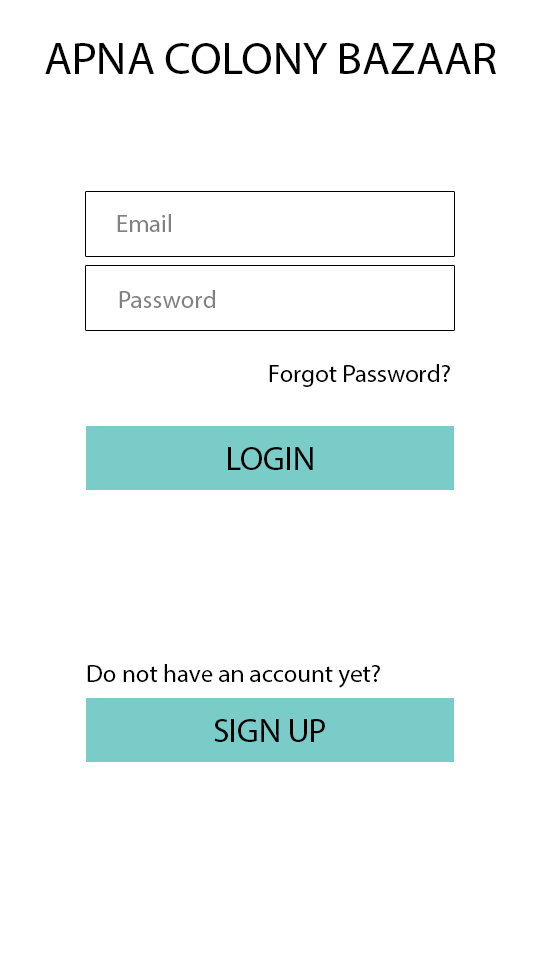
<style>
.page{position:relative;width:540px;height:960px;background:#ffffff}
.page>*{position:absolute;margin:0}
.t1{font:45.8px "MyriadPro-Regular";color:#000000}
.t2{font:25px "MyriadPro-Regular";color:#818181}
.t3{font:25px "MyriadPro-Regular";color:#000000}
.t4{font:33.3px "MyriadPro-Regular";color:#000000}
</style>
<div class="page">
<p class="t1" style="left:45px;top:43px;width:451px;height:31px">APNA COLONY BAZAAR</p>
<p class="t2" style="left:117px;top:214px;width:54px;height:18px">Email</p>
<p class="t2" style="left:119px;top:290px;width:96px;height:18px">Password</p>
<p class="t3" style="left:269px;top:364px;width:181px;height:23px">Forgot Password?</p>
<p class="t4" style="left:228px;top:447px;width:85px;height:23px">LOGIN</p>
<p class="t3" style="left:87px;top:664px;width:293px;height:24px">Do not have an account yet?</p>
<p class="t4" style="left:214px;top:719px;width:111px;height:23px">SIGN UP</p>
</div>
